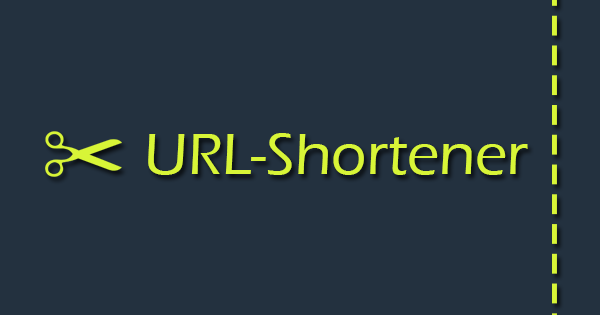
<style>
.page{position:relative;width:600px;height:315px;background:#23313f}
.page>*{position:absolute;margin:0}
.t1{font:60px "ErasITC-Medium";color:#d8f537}
</style>
<div class="page">
<p class="t1" style="left:148px;top:133px;width:380px;height:42px">URL-Shortener</p>
</div>
